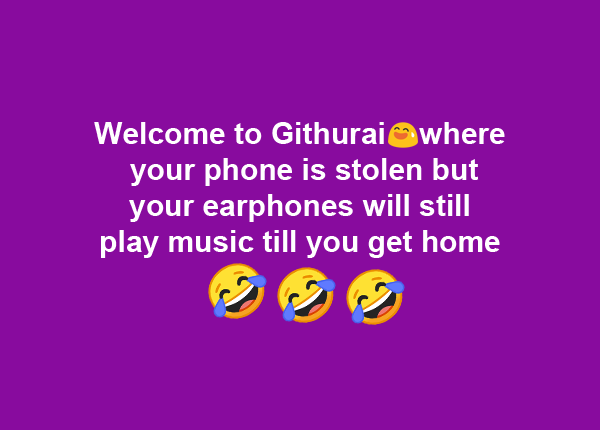
<style>
.page{position:relative;width:600px;height:430px;background:#880b9e}
.page>*{position:absolute;margin:0}
.t1{font:30px "Arial-BoldMT";color:#ffffff}
</style>
<div class="page">
<p class="t1" style="left:94px;top:122px;width:411px;height:136px;text-align:center">Welcome to Githurai    where<br> your phone is stolen but <br>your earphones will still <br>play music till you get home</p>
</div>
